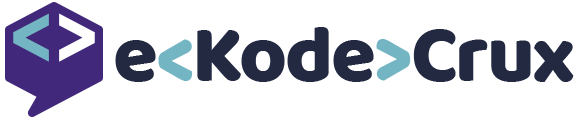
<style>
.page{position:relative;width:585px;height:119px;background:#ffffff}
.page>*{position:absolute;margin:0}
.t1{font:82px "Baloo";letter-spacing:-0.025em;color:#232941}
.t2{font:82px "Baloo";letter-spacing:-0.025em;color:#74b5c3}
</style>
<div class="page">
<p class="t1" style="left:115px;top:27px;width:459px;height:55px">e<span class="t2">&lt;</span>Kode<span class="t2">&gt;</span>Crux</p>
</div>
